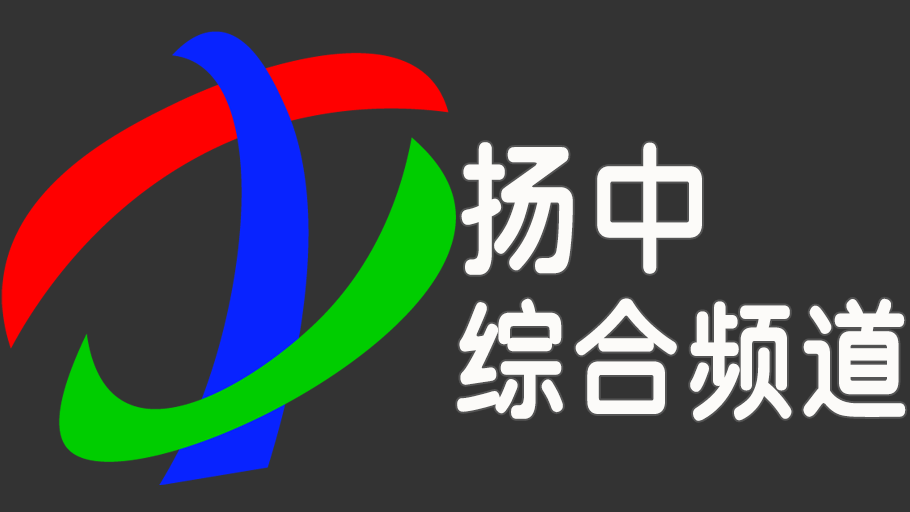
<style>
.page{position:relative;width:910px;height:512px;background:#333333}
.page>*{position:absolute;margin:0}
.t1{font:132px/160px "SJyuantijian-C-Regular";letter-spacing:0.02em;color:#fcfbf9;scale:0.85 1}
.t2{font:150px/160px "SJyuantijian-C-Regular";letter-spacing:0.02em;color:#fcfbf9;scale:0.85 1}
</style>
<div class="page">
<p class="t1" style="left:457px;top:142px;width:449px;height:279px"><span class="t2">扬中<br></span>综合频道</p>
</div>
